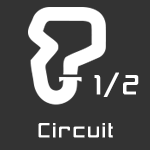
<style>
.page{position:relative;width:150px;height:150px;background:#333333}
.page>*{position:absolute;margin:0}
.t1{font:38px "Cynthe";color:#ffffff;font-weight:bold}
.t2{font:28px "Cynthe";color:#ffffff;font-weight:bold}
</style>
<div class="page">
<p class="t1" style="left:94px;top:72px;width:45px;height:25px">1/2</p>
<p class="t2" style="left:38px;top:123px;width:75px;height:15px">Circuit</p>
</div>
